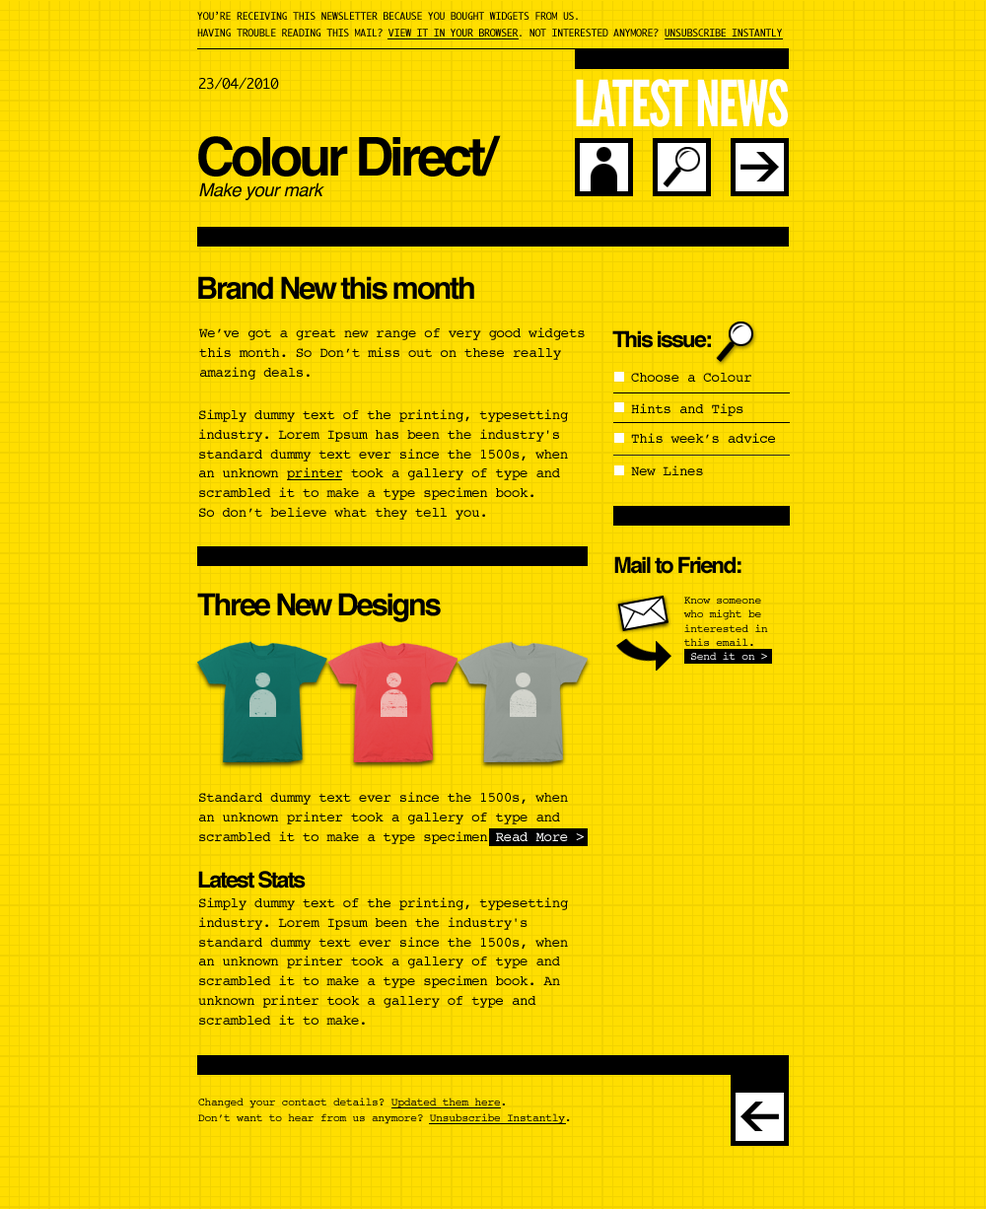
<style>
.page{position:relative;width:986px;height:1209px;background:#ffde00}
.page>*{position:absolute;margin:0}
.t1{font:9.8px "Monaco";letter-spacing:-0.025em;color:#000000;text-transform:uppercase}
.t2{font:14px "Monaco";letter-spacing:-0.025em;color:#000000}
.t3{font:63.5px "LeagueGothic";letter-spacing:-0.025em;color:#ffffff;text-transform:uppercase}
.t4{font:53.5px "Helvetica-Bold";letter-spacing:-0.075em;color:#000000}
.t5{font:18.2px "Helvetica-Oblique";letter-spacing:-0.025em;color:#000000}
.t6{font:30.5px "Helvetica-Bold";letter-spacing:-0.075em;color:#000000}
.t7{font:14px/19.6px "Courier";letter-spacing:-0.025em;color:#000000}
.t8{font:22.4px "Helvetica-Bold";letter-spacing:-0.075em;color:#000000}
.t9{font:14px "Courier";letter-spacing:-0.025em;color:#000000}
.t10{font:11.2px/14px "Courier";letter-spacing:-0.025em;color:#000000}
.t11{font:11.2px/14px "Courier";letter-spacing:-0.025em;color:#ffffff}
.t12{font:14px/19.6px "Courier";letter-spacing:-0.025em;color:#ffffff}
.t13{font:11.2px/15.1px "Courier";letter-spacing:-0.025em;color:#000000}
</style>
<div class="page">
<p class="t1" style="left:197px;top:11px;width:381px;height:9px">You’rE receiving this newsletter because you bought widgets from us.</p>
<p class="t1" style="left:197px;top:29px;width:585px;height:7px">Having trouble reading this mail? View it in your browser. Not interested anymore? Unsubscribe instantly</p>
<p class="t2" style="left:199px;top:77px;width:80px;height:13px">23/04/2010</p>
<p class="t3" style="left:576px;top:79px;width:212px;height:48px">LATEST NEWS</p>
<p class="t4" style="left:198px;top:135px;width:303px;height:42px">Colour Direct/</p>
<p class="t5" style="left:199px;top:182px;width:125px;height:18px">Make your mark</p>
<p class="t6" style="left:198px;top:276px;width:276px;height:24px">Brand New this month</p>
<p class="t7" style="left:199px;top:327px;width:386px;height:53px">We’ve got a great new range of very good widgets<br>this month. So Don’t miss out on these really<br>amazing deals.</p>
<p class="t8" style="left:612px;top:330px;width:99px;height:18px">This issue:</p>
<p class="t9" style="left:631px;top:373px;width:120px;height:9px">Choose a Colour</p>
<p class="t7" style="left:199px;top:409px;width:369px;height:111px">Simply dummy text of the printing, typesetting<br>industry. Lorem Ipsum has been the industry's<br>standard dummy text ever since the 1500s, when<br>an unknown printer took a gallery of type and <br>scrambled it to make a type specimen book.<br>So don’t believe what they tell you.</p>
<p class="t9" style="left:631px;top:403px;width:113px;height:13px">Hints and Tips</p>
<p class="t9" style="left:631px;top:433px;width:144px;height:10px">This week’s advice</p>
<p class="t9" style="left:631px;top:465px;width:72px;height:10px">New Lines</p>
<p class="t8" style="left:614px;top:556px;width:128px;height:18px">Mail to Friend:</p>
<p class="t6" style="left:197px;top:593px;width:244px;height:29px">Three New Designs</p>
<p class="t10" style="left:683px;top:597px;width:85px;height:63px">Know someone<br>who might be<br>interested in<br>this email.<br><span class="t11"> Send it on &gt;</span></p>
<p class="t7" style="left:199px;top:792px;width:385px;height:52px">Standard dummy text ever since the 1500s, when<br>an unknown printer took a gallery of type and <br>scrambled it to make a type specimen <span class="t12">Read More &gt;</span></p>
<p class="t8" style="left:198px;top:871px;width:108px;height:18px">Latest Stats</p>
<p class="t7" style="left:198px;top:897px;width:370px;height:128px">Simply dummy text of the printing, typesetting<br>industry. Lorem Ipsum been the industry's<br>standard dummy text ever since the 1500s, when<br>an unknown printer took a gallery of type and <br>scrambled it to make a type specimen book. An<br>unknown printer took a gallery of type and <br>scrambled it to make.</p>
<p class="t13" style="left:198px;top:1098px;width:372px;height:26px">Changed your contact details? Updated them here.<br>Don’t want to hear from us anymore? Unsubscribe Instantly.</p>
</div>
